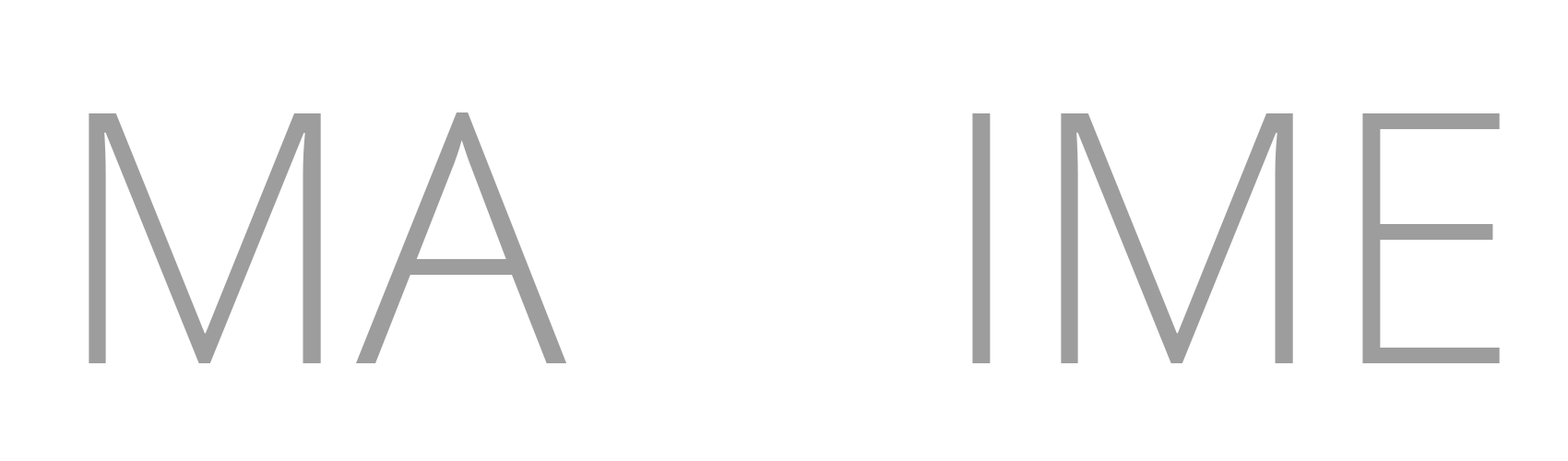
<style>
.page{position:relative;width:1568px;height:461px;background:#ffffff}
.page>*{position:absolute;margin:0}
.t1{font:350.5px "OpenSans-Light";color:#9d9d9d}
.t2{font:350.5px "OpenSans-Light";color:#ffffff}
</style>
<div class="page">
<p class="t1" style="left:89px;top:113px;width:1411px;height:250px">MA <span class="t2">X</span> IME</p>
</div>
